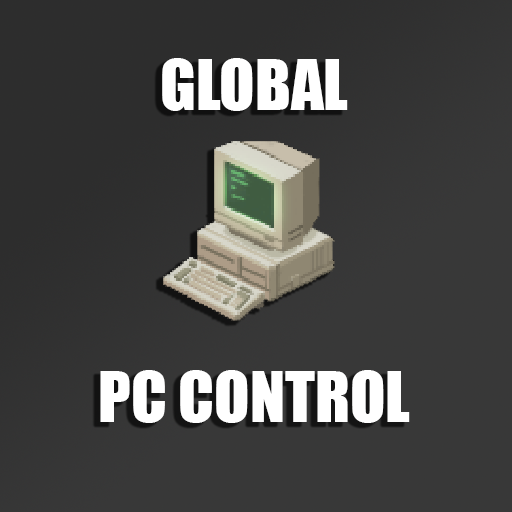
<style>
.page{position:relative;width:512px;height:512px;background:#383838}
.page>*{position:absolute;margin:0}
.t1{font:64.9px "Impact";color:#ffffff}
</style>
<div class="page">
<p class="t1" style="left:100px;top:58px;width:310px;height:365px;text-align:center">GLOBAL<br><br><br><br>PC CONTROL</p>
</div>
